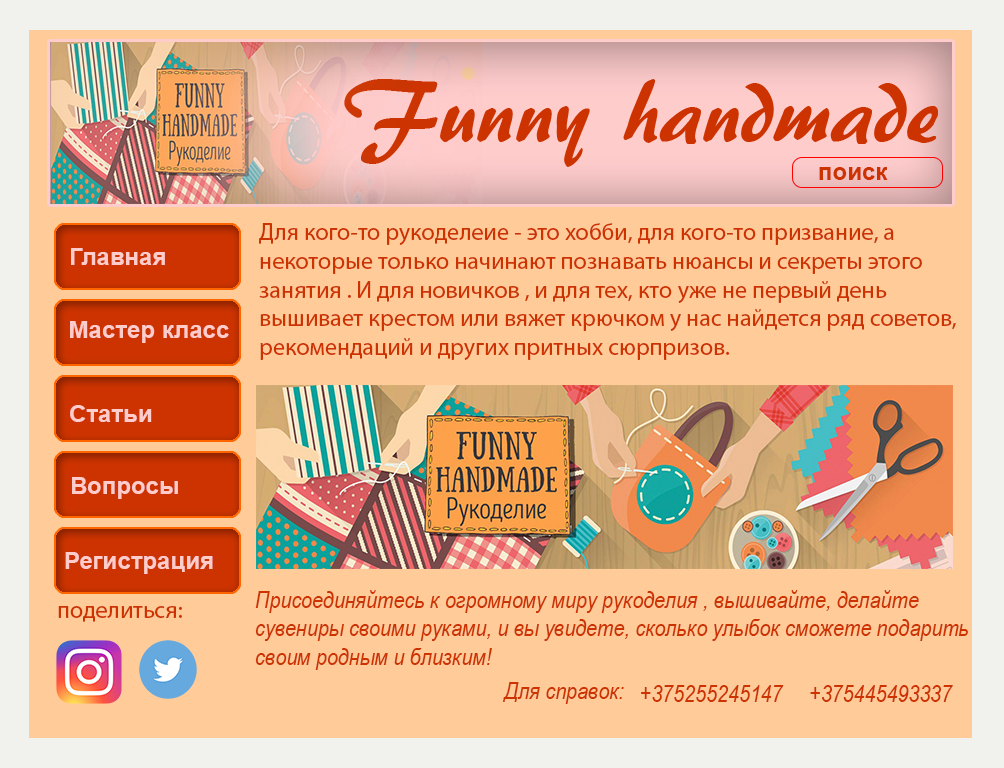
<style>
.page{position:relative;width:1004px;height:768px;background:#ffcc99}
.page>*{position:absolute;margin:0}
.t1{font:90px "ARBERKLEY";color:#cc3300}
.t2{font:24px "Arial-BoldMT";color:#cc3300}
.t3{font:24px "MyriadPro-Regular";color:#cc3300}
.t4{font:24px "Arial-BoldMT";color:#ffcccc}
.t5{font:24px "ArialNarrow-Italic";color:#cc3300}
</style>
<div class="page">
<p class="t1" style="left:344px;top:79px;width:594px;height:88px">Funny handmade</p>
<p class="t2" style="left:819px;top:167px;width:69px;height:13px">поиск</p>
<p class="t3" style="left:259px;top:223px;width:697px;height:137px">Для кого-то рукоделеие - это хобби, для кого-то призвание, а <br>некоторые только начинают познавать нюансы и секреты этого <br>занятия . И для новичков , и для тех, кто уже не первый день <br>вышивает крестом или вяжет крючком у нас найдется ряд советов, <br>рекомендаций и других притных сюрпризов.</p>
<p class="t4" style="left:71px;top:248px;width:94px;height:17px">Главная</p>
<p class="t4" style="left:70px;top:321px;width:159px;height:22px">Мастер класс</p>
<p class="t4" style="left:70px;top:405px;width:82px;height:17px">Статьи</p>
<p class="t4" style="left:72px;top:477px;width:106px;height:22px">Вопросы</p>
<p class="t4" style="left:65px;top:552px;width:148px;height:22px">Регистрация</p>
<p class="t5" style="left:255px;top:590px;width:713px;height:80px">Присоединяйтесь к огромному миру рукоделия , вышивайте, делайте <br>сувениры своими руками, и вы увидете, сколько улыбок сможете подарить <br>своим родным и близким!</p>
<p class="t3" style="left:58px;top:606px;width:124px;height:16px">поделиться:</p>
<p class="t5" style="left:503px;top:682px;width:121px;height:22px">Для справок:</p>
<p class="t5" style="left:641px;top:685px;width:143px;height:17px">+375255245147</p>
<p class="t5" style="left:810px;top:685px;width:143px;height:17px">+375445493337</p>
</div>
